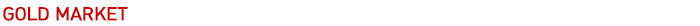
<style>
.page{position:relative;width:700px;height:26px;background:#ffffff}
.page>*{position:absolute;margin:0}
.t1{font:18px "HCRDotum-Bold";color:#cc0000}
</style>
<div class="page">
<p class="t1" style="left:3px;top:6px;width:125px;height:15px">GOLD MARKET</p>
</div>
